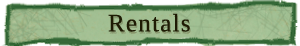
<style>
.page{position:relative;width:300px;height:46px}
.page>*{position:absolute;margin:0}
.t1{font:25px "Tinos";letter-spacing:0.05em;color:#1e1b04}
</style>
<div class="page">
<p class="t1" style="left:108px;top:13px;width:82px;height:19px">Rentals</p>
</div>
